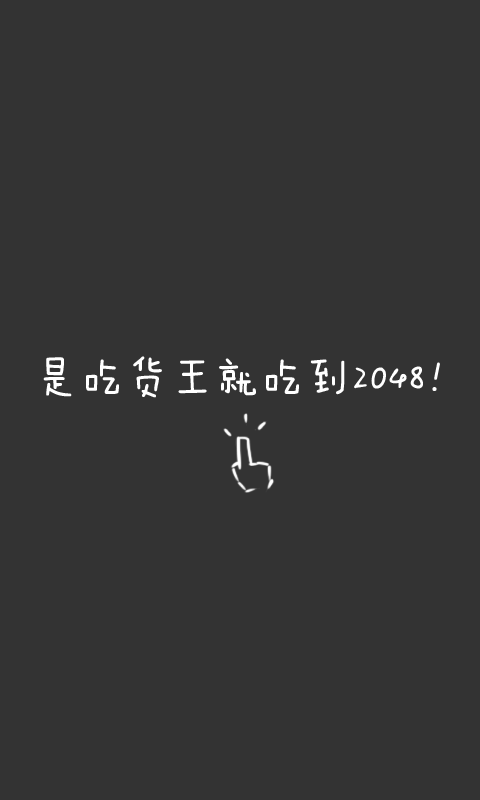
<style>
.page{position:relative;width:480px;height:800px;background:#333333}
.page>*{position:absolute;margin:0}
.t1{font:45px "FZMWJW--GB1-0";color:#ffffff}
</style>
<div class="page">
<p class="t1" style="left:43px;top:356px;width:397px;height:42px">是吃货王就吃到2048！</p>
</div>
